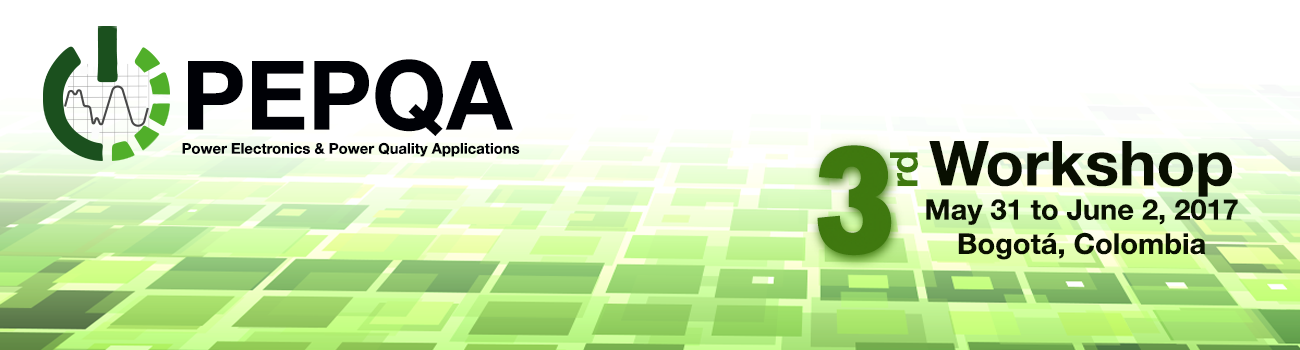
<style>
.page{position:relative;width:1300px;height:350px;background:#ffffff}
.page>*{position:absolute;margin:0}
.t1{font:96px "HelveticaNeue-Bold";color:#000106}
.t2{font:14.8px "HelveticaNeue-Bold";color:#000106}
.t3{font:156.8px "Rockwell-ExtraBold";color:#3f780f;scale:0.8 1}
.t4{font:28.5px "HelveticaNeue-Bold";color:#090f01}
.t5{font:62.2px "HelveticaNeue-Bold";color:#090f01}
.t6{font:38.2px "HelveticaNeue-Bold";color:#3f780f}
</style>
<div class="page">
<p class="t1" style="left:188px;top:59px;width:325px;height:77px">PEPQA</p>
<p class="t2" style="left:182px;top:142px;width:338px;height:15px">Power Electronics &amp; Power Quality Applications</p>
<p class="t3" style="left:817px;top:145px;width:75px;height:111px">3</p>
<p class="t4" style="left:926px;top:141px;width:312px;height:119px;text-align:center"><span class="t5">Workshop<br></span>May 31 to June 2, 2017<br>Bogotá, Colombia</p>
<p class="t6" style="left:890px;top:152px;width:28px;height:34px;rotate:-90deg">rd</p>
</div>
